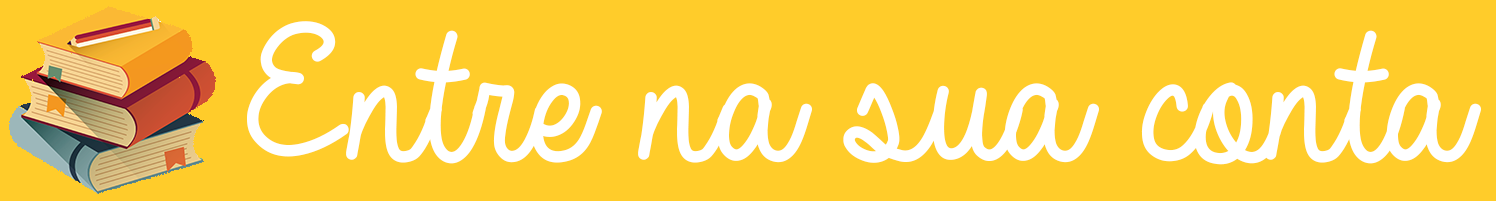
<style>
.page{position:relative;width:1496px;height:201px;background:#ffcc2a}
.page>*{position:absolute;margin:0}
.t1{font:208.3px "AlwaysInMyHeart";color:#ffffff}
</style>
<div class="page">
<p class="t1" style="left:247px;top:21px;width:1234px;height:144px">Entre na sua conta</p>
</div>
